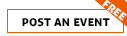
<style>
.page{position:relative;width:127px;height:36px;background:#ffffff}
.page>*{position:absolute;margin:0}
.t1{font:13.6px "Aller-Bold";color:#ffffff;font-variant:small-caps}
.t2{font:14px "Aller-Bold";color:#000000;font-variant:small-caps}
</style>
<div class="page">
<p class="t1" style="left:102px;top:0px;width:25px;height:21px;rotate:38deg">free</p>
<p class="t2" style="left:22px;top:18px;width:88px;height:9px">post an event</p>
</div>
